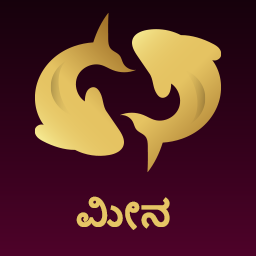
<style>
.page{position:relative;width:256px;height:256px}
.page>*{position:absolute;margin:0}
.t1{font:34.1px "NirmalaUI-Bold";letter-spacing:-0.05em;color:#e6c565;text-transform:uppercase;font-weight:bold}
</style>
<div class="page">
<p class="t1" style="left:76px;top:196px;width:94px;height:34px">ಮೀನ</p>
</div>
